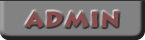
<style>
.page{position:relative;width:145px;height:40px;background:#828282}
.page>*{position:absolute;margin:0}
.t1{font:22px "Lithograph-Bold";letter-spacing:0.05em;color:#8b4e4e}
</style>
<div class="page">
<p class="t1" style="left:25px;top:10px;width:94px;height:18px">Admin</p>
</div>
